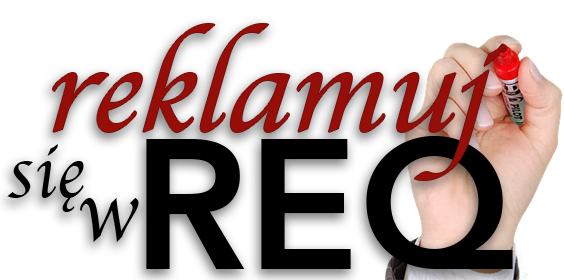
<style>
.page{position:relative;width:564px;height:280px;background:#ffffff}
.page>*{position:absolute;margin:0}
.t1{font:121.9px "Apple-Chancery";color:#970d07;font-style:italic}
.t2{font:182.9px "Avenir-Heavy";color:#000000}
.t3{font:76.2px "Apple-Chancery";color:#000000}
.t4{font:91.4px "Apple-Chancery";color:#000000}
</style>
<div class="page">
<p class="t1" style="left:53px;top:24px;width:450px;height:156px">reklamuj</p>
<p class="t2" style="left:146px;top:136px;width:367px;height:133px">REQ</p>
<p class="t3" style="left:7px;top:144px;width:77px;height:68px">się</p>
<p class="t4" style="left:80px;top:198px;width:59px;height:44px">w</p>
</div>
